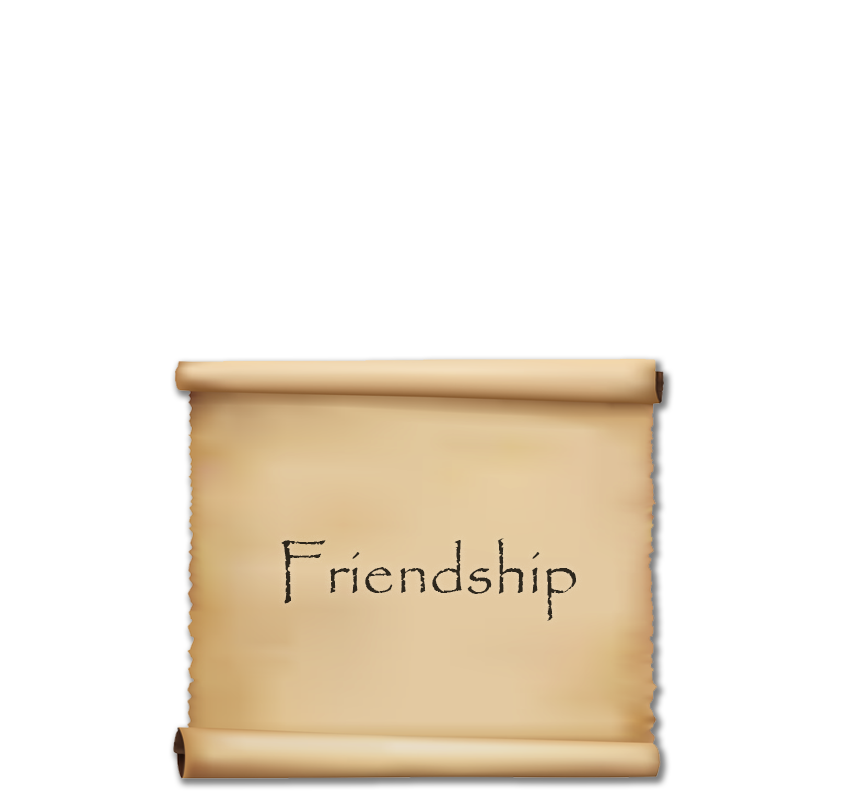
<style>
.page{position:relative;width:844px;height:807px;background:#ffffff}
.page>*{position:absolute;margin:0}
.t1{font:65.8px "Papyrus-Regular";color:#2d271d}
</style>
<div class="page">
<p class="t1" style="left:281px;top:538px;width:296px;height:83px">Friendship</p>
</div>
